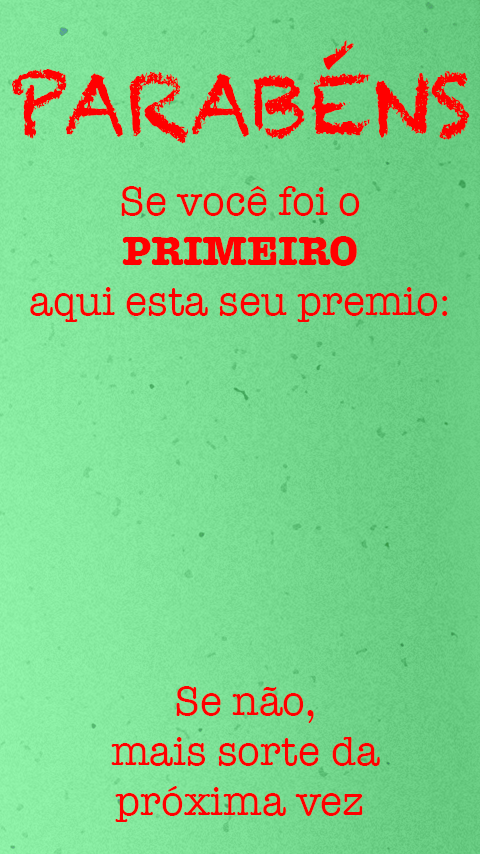
<style>
.page{position:relative;width:480px;height:854px}
.page>*{position:absolute;margin:0}
.t1{font:83.4px "Chalkduster";color:#ff0000}
.t2{font:41.7px "AmericanTypewriter";color:#ff0000}
.t3{font:41.7px "AmericanTypewriter-Bold";color:#ff0000}
</style>
<div class="page">
<p class="t1" style="left:12px;top:40px;width:458px;height:104px">PARABÉNS</p>
<p class="t2" style="left:30px;top:186px;width:418px;height:136px;text-align:center">Se você foi o <br><span class="t3">PRIMEIRO<br></span>aqui esta seu premio:</p>
<p class="t2" style="left:111px;top:686px;width:269px;height:136px;text-align:center">Se não,<br> mais sorte da <br>próxima vez</p>
</div>
